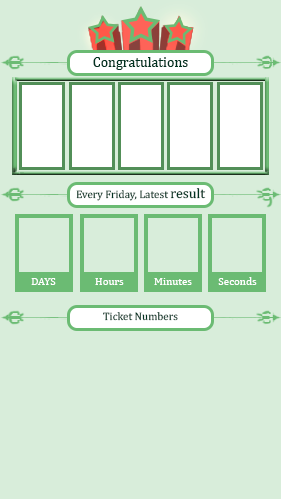
<style>
.page{position:relative;width:281px;height:499px;background:#d8edda}
.page>*{position:absolute;margin:0}
.t1{font:14px "Cambria";color:#013220}
.t2{font:11px "Cambria";color:#013220}
.t3{font:11px "Cambria";color:#ffffff}
</style>
<div class="page">
<p class="t1" style="left:93px;top:57px;width:95px;height:13px">Congratulations</p>
<p class="t2" style="left:76px;top:188px;width:130px;height:13px">Every Friday, Latest <span class="t1">result</span></p>
<p class="t3" style="left:31px;top:278px;width:25px;height:7px">DAYS</p>
<p class="t3" style="left:95px;top:278px;width:29px;height:7px">Hours</p>
<p class="t3" style="left:154px;top:278px;width:38px;height:7px">Minutes</p>
<p class="t3" style="left:218px;top:277px;width:39px;height:8px">Seconds</p>
<p class="t2" style="left:103px;top:312px;width:75px;height:9px">Ticket Numbers</p>
</div>
